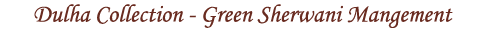
<style>
.page{position:relative;width:500px;height:30px;background:#ffffff}
.page>*{position:absolute;margin:0}
.t1{font:25px "MonotypeCorsiva";color:#692b20}
</style>
<div class="page">
<p class="t1" style="left:34px;top:4px;width:419px;height:24px">Dulha Collection - Green Sherwani Mangement</p>
</div>
